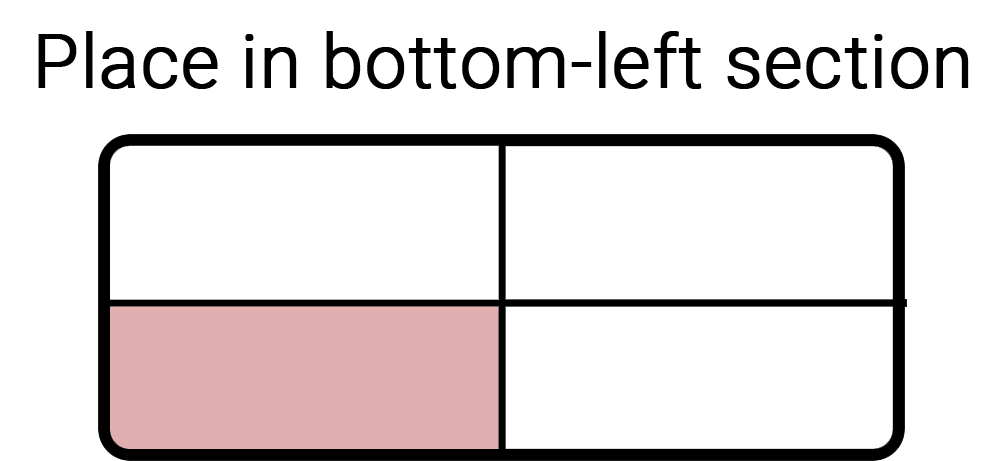
<style>
.page{position:relative;width:1000px;height:461px;background:#ffffff}
.page>*{position:absolute;margin:0}
.t1{font:74px "Roboto-Light";color:#000000;font-weight:bold}
</style>
<div class="page">
<p class="t1" style="left:38px;top:31px;width:931px;height:58px">Place in bottom-left section</p>
</div>
